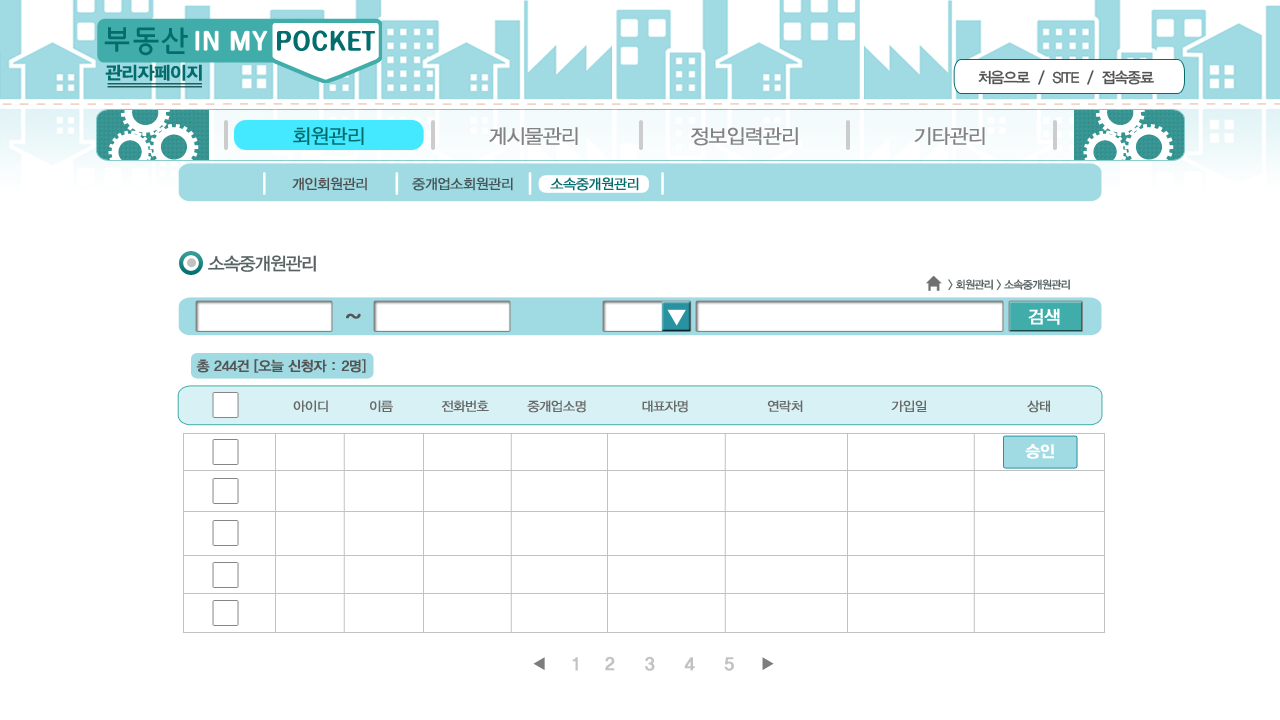
<style>
.page{position:relative;width:1280px;height:720px;background:#ffffff}
.page>*{position:absolute;margin:0}
.t1{font:17.8px "YDIYGO340";letter-spacing:-0.04em;color:#036d6d;font-weight:bold}
.t2{font:15px "YDIYGO330";letter-spacing:-0.06em;color:#535353}
.t3{font:20px "YDIYGO320";letter-spacing:-0.04em;color:#036d6d;font-weight:bold}
.t4{font:20px "YDIYGO320";letter-spacing:-0.04em;color:#838383;font-weight:bold}
.t5{font:14px "YDIYGO320";letter-spacing:-0.04em;color:#4f4f4f;font-weight:bold}
.t6{font:14px "YDIYGO320";letter-spacing:-0.04em;color:#445658;font-weight:bold}
.t7{font:14px "YDIYGO320";letter-spacing:-0.04em;color:#036d6d;font-weight:bold}
.t8{font:18px "YDIYGO330";letter-spacing:-0.06em;color:#576262}
.t9{font:11px "YDIYGO330";letter-spacing:-0.06em;color:#576262}
.t10{font:23.8px "FBsky-Medium--KSCpc-EUC-H";letter-spacing:-0.04em;color:#555555;font-weight:bold}
.t11{font:17.8px "YDIYGO330";letter-spacing:-0.04em;color:#ffffff;font-weight:bold}
.t12{font:13.8px "YDIYGO330";letter-spacing:-0.04em;color:#555555;font-weight:bold}
.t13{font:13px "YDIYGO320";letter-spacing:-0.04em;color:#696969;font-weight:bold}
.t14{font:16px "YDIYGO340";letter-spacing:-0.04em;color:#ffffff;font-weight:bold}
.t15{font:17.8px "YDIYGO340";letter-spacing:-0.04em;color:#c2c2c2;font-weight:bold}
</style>
<div class="page">
<p class="t1" style="left:105px;top:64px;width:97px;height:17px">관리자페이지</p>
<p class="t2" style="left:978px;top:70px;width:176px;height:15px">처음으로  /  SITE  /  접속종료</p>
<p class="t3" style="left:293px;top:127px;width:71px;height:18px">회원관리</p>
<p class="t4" style="left:489px;top:127px;width:89px;height:18px">게시물관리</p>
<p class="t4" style="left:691px;top:127px;width:107px;height:19px">정보입력관리</p>
<p class="t4" style="left:914px;top:127px;width:71px;height:18px">기타관리</p>
<p class="t5" style="left:292px;top:177px;width:75px;height:14px">개인회원관리</p>
<p class="t6" style="left:412px;top:177px;width:101px;height:14px">중개업소회원관리</p>
<p class="t7" style="left:550px;top:177px;width:89px;height:14px">소속중개원관리</p>
<p class="t8" style="left:208px;top:255px;width:108px;height:17px">소속중개원관리</p>
<p class="t9" style="left:948px;top:279px;width:122px;height:12px">&gt; 회원관리 &gt; 소속중개원관리</p>
<p class="t10" style="left:346px;top:313px;width:15px;height:6px">~</p>
<p class="t11" style="left:1028px;top:308px;width:32px;height:17px">검색</p>
<p class="t12" style="left:196px;top:359px;width:170px;height:14px">총 244건 [오늘 신청자 : 2명]</p>
<p class="t13" style="left:293px;top:400px;width:35px;height:12px">아이디</p>
<p class="t13" style="left:370px;top:400px;width:23px;height:12px">이름</p>
<p class="t13" style="left:441px;top:400px;width:48px;height:12px">전화번호</p>
<p class="t13" style="left:527px;top:400px;width:59px;height:13px">중개업소명</p>
<p class="t13" style="left:642px;top:400px;width:46px;height:13px">대표자명</p>
<p class="t13" style="left:767px;top:400px;width:36px;height:12px">연락처</p>
<p class="t13" style="left:891px;top:400px;width:36px;height:12px">가입일</p>
<p class="t13" style="left:1027px;top:400px;width:23px;height:13px">상태</p>
<p class="t14" style="left:1025px;top:444px;width:29px;height:15px">승인</p>
<p class="t15" style="left:572px;top:656px;width:162px;height:15px">1    2     3     4     5</p>
</div>
